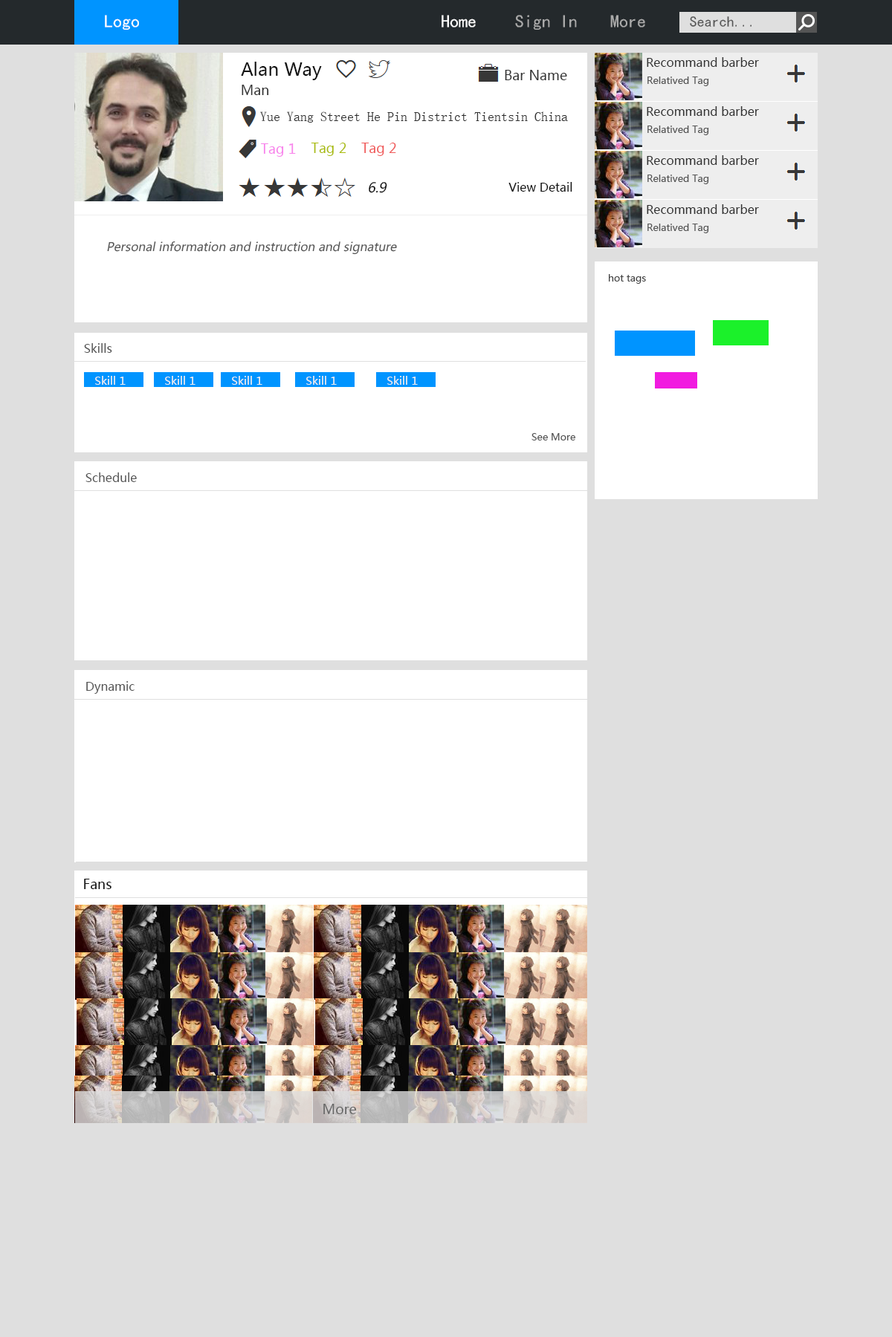
<style>
.page{position:relative;width:892px;height:1337px;background:#dfdfdf}
.page>*{position:absolute;margin:0}
.t1{font:17.8px "¿¬Ìå";color:#ffffff}
.t2{font:17.8px "¿¬Ìå";color:#aaaaaa}
.t3{font:14.9px "¿¬Ìå";color:#555555}
.t4{font:17.8px "MicrosoftYaHei";color:#111111}
.t5{font:11.9px "MicrosoftYaHei";color:#333333}
.t6{font:13.4px "MicrosoftYaHei";color:#333333}
.t7{font:9.7px "MicrosoftYaHei";color:#555555}
.t8{font:13.4px "NSimSun";color:#333333}
.t9{font:13.4px "MicrosoftYaHei";color:#f885ec}
.t10{font:13.4px "MicrosoftYaHei";color:#abbd10}
.t11{font:13.4px "MicrosoftYaHei";color:#f05d5d}
.t12{font:13.4px "MicrosoftYaHei";color:#111111;font-style:italic}
.t13{font:11.9px "MicrosoftYaHei";color:#111111}
.t14{font:11.9px "MicrosoftYaHei";color:#555555;font-style:italic}
.t15{font:9.7px "MicrosoftYaHei";color:#444444}
.t16{font:11.9px "MicrosoftYaHei";color:#555555}
.t17{font:11.1px "MicrosoftYaHei";color:#eeeeee}
.t18{font:13.4px "MicrosoftYaHei";color:#111111}
.t19{font:13.4px "MicrosoftYaHei";color:#666666}
</style>
<div class="page">
<p class="t1" style="left:105px;top:15px;width:34px;height:15px">Logo</p>
<p class="t1" style="left:441px;top:15px;width:35px;height:12px">Home</p>
<p class="t2" style="left:515px;top:15px;width:62px;height:15px">Sign In</p>
<p class="t2" style="left:610px;top:15px;width:35px;height:12px">More</p>
<p class="t3" style="left:690px;top:16px;width:61px;height:11px">Search...</p>
<p class="t4" style="left:241px;top:62px;width:81px;height:18px">Alan Way</p>
<p class="t5" style="left:646px;top:57px;width:113px;height:10px">Recommand barber</p>
<p class="t6" style="left:504px;top:70px;width:63px;height:10px">Bar Name</p>
<p class="t7" style="left:647px;top:77px;width:62px;height:9px">Relatived Tag</p>
<p class="t6" style="left:241px;top:85px;width:28px;height:10px">Man</p>
<p class="t8" style="left:260px;top:111px;width:308px;height:12px">Yue Yang Street He Pin District Tientsin China</p>
<p class="t5" style="left:646px;top:106px;width:113px;height:10px">Recommand barber</p>
<p class="t7" style="left:647px;top:126px;width:62px;height:9px">Relatived Tag</p>
<p class="t9" style="left:261px;top:143px;width:35px;height:14px">Tag 1</p>
<p class="t10" style="left:311px;top:143px;width:35px;height:13px">Tag 2</p>
<p class="t11" style="left:361px;top:143px;width:35px;height:13px">Tag 2</p>
<p class="t5" style="left:646px;top:155px;width:113px;height:10px">Recommand barber</p>
<p class="t12" style="left:369px;top:182px;width:18px;height:11px">6.9</p>
<p class="t13" style="left:508px;top:182px;width:64px;height:10px">View Detail</p>
<p class="t7" style="left:647px;top:175px;width:62px;height:9px">Relatived Tag</p>
<p class="t5" style="left:646px;top:204px;width:113px;height:10px">Recommand barber</p>
<p class="t7" style="left:647px;top:224px;width:62px;height:9px">Relatived Tag</p>
<p class="t14" style="left:107px;top:241px;width:290px;height:14px">Personal information and instruction and signature</p>
<p class="t15" style="left:609px;top:274px;width:37px;height:10px">hot tags</p>
<p class="t16" style="left:84px;top:343px;width:28px;height:10px">Skills</p>
<p class="t17" style="left:95px;top:376px;width:31px;height:9px">Skill 1</p>
<p class="t17" style="left:165px;top:376px;width:30px;height:9px">Skill 1</p>
<p class="t17" style="left:232px;top:376px;width:30px;height:9px">Skill 1</p>
<p class="t17" style="left:306px;top:376px;width:31px;height:9px">Skill 1</p>
<p class="t17" style="left:387px;top:376px;width:31px;height:9px">Skill 1</p>
<p class="t7" style="left:531px;top:433px;width:44px;height:8px">See More</p>
<p class="t16" style="left:85px;top:473px;width:52px;height:9px">Schedule</p>
<p class="t16" style="left:86px;top:681px;width:48px;height:13px">Dynamic</p>
<p class="t18" style="left:84px;top:879px;width:27px;height:10px">Fans</p>
<p class="t19" style="left:323px;top:1104px;width:34px;height:11px">More</p>
</div>
